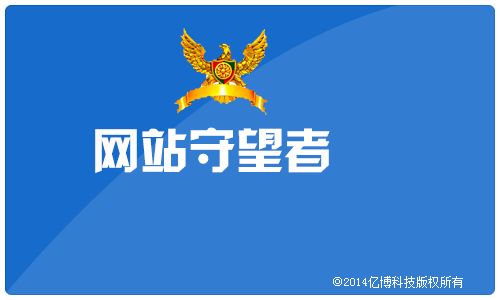
<style>
.page{position:relative;width:500px;height:300px;background:#327dd1}
.page>*{position:absolute;margin:0}
.t1{font:48px "HYk2gj";color:#ffffff}
.t2{font:12px "SimSun";color:#ffffff}
</style>
<div class="page">
<p class="t1" style="left:95px;top:127px;width:235px;height:46px">网站守望者</p>
<p class="t2" style="left:333px;top:276px;width:130px;height:12px">◎2014亿博科技版权所有</p>
</div>
